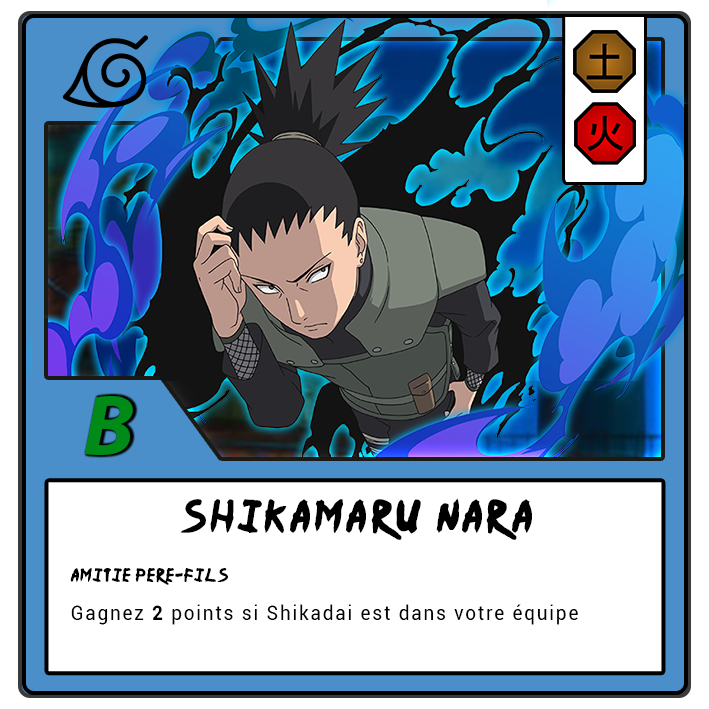
<style>
.page{position:relative;width:709px;height:709px;background:#ffffff}
.page>*{position:absolute;margin:0}
.t1{font:87.5px "MyriadPro-BoldIt";letter-spacing:-0.12em;color:#008a17}
.t2{font:37.5px "Ninja-Naruto";letter-spacing:0.1em;color:#000000}
.t3{font:15.4px "Ninja-Naruto";letter-spacing:0.07em;color:#000000}
.t4{font:20.8px "Roboto-Regular";letter-spacing:0.1em;color:#000000;scale:0.9 1}
.t5{font:20.8px "Roboto-Bold";letter-spacing:0.1em;color:#000000;scale:0.9 1}
</style>
<div class="page">
<p class="t1" style="left:85px;top:396px;width:48px;height:59px">B</p>
<p class="t2" style="left:180px;top:498px;width:352px;height:42px">Shikamaru Nara</p>
<p class="t3" style="left:70px;top:568px;width:158px;height:17px">Amitie pere-fils</p>
<p class="t4" style="left:71px;top:604px;width:507px;height:21px">Gagnez <span class="t5">2</span> points si Shikadai est dans votre équipe</p>
</div>
